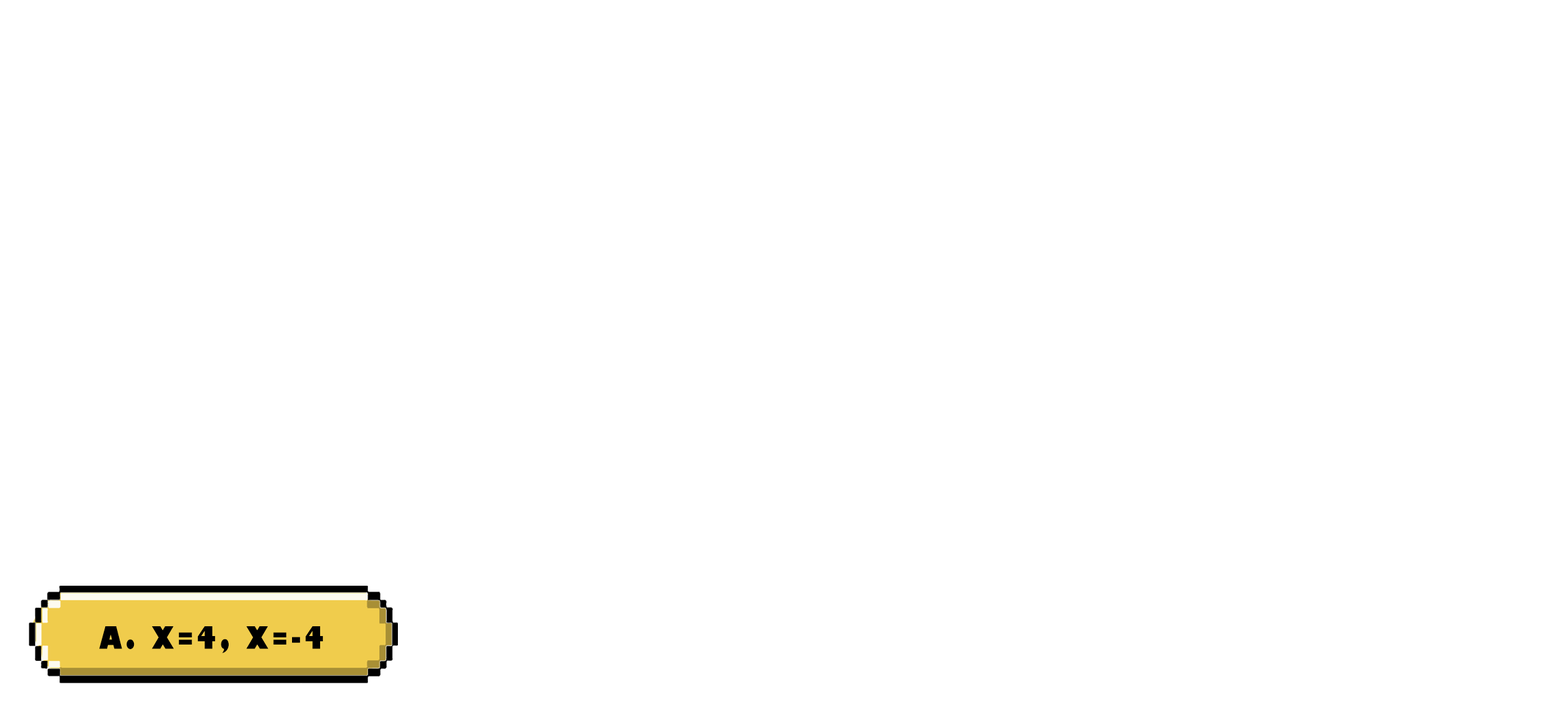
<style>
.page{position:relative;width:1568px;height:706px;background:#ffffff}
.page>*{position:absolute;margin:0}
.t1{font:29.9px "GillSans-UltraBoldCondensed";letter-spacing:0.115em;color:#000000;text-transform:uppercase;scale:1.12 1}
</style>
<div class="page">
<p class="t1" style="left:99px;top:626px;width:224px;height:27px">a. x=4, x=-4</p>
</div>
